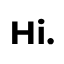
<style>
.page{position:relative;width:64px;height:64px;background:#ffffff}
.page>*{position:absolute;margin:0}
.t1{font:32.2px "Montserrat-Bold";color:#000000;scale:1.03 1}
</style>
<div class="page">
<p class="t1" style="left:12px;top:18px;width:42px;height:27px">Hi.</p>
</div>
